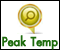
<style>
.page{position:relative;width:60px;height:50px;background:#ffffff}
.page>*{position:absolute;margin:0}
.t1{font:17px "PSLxKittithada-Bold";color:#1e6b0d;font-weight:bold}
</style>
<div class="page">
<p class="t1" style="left:2px;top:35px;width:56px;height:15px">Peak Temp</p>
</div>
